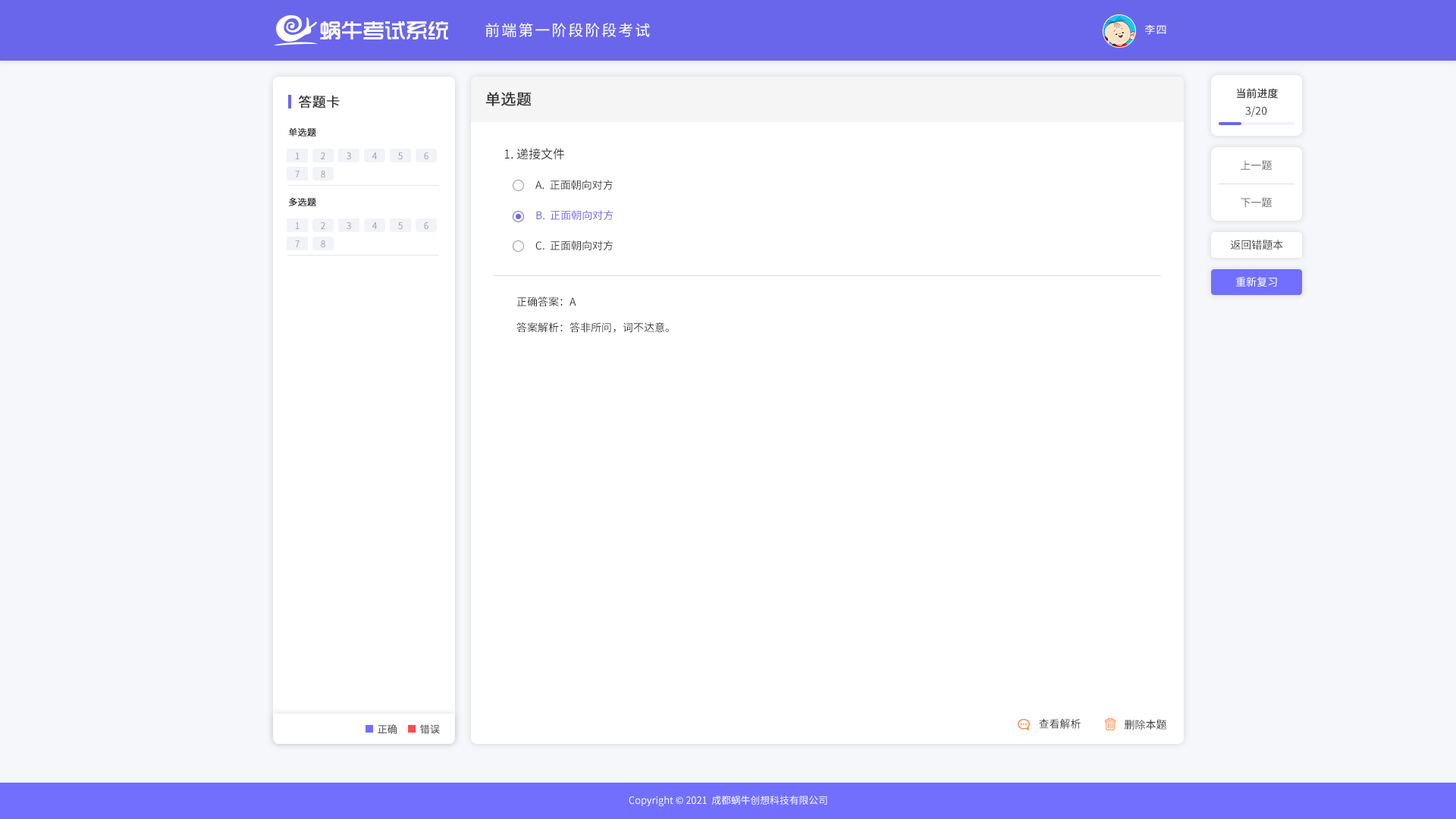
<style>
.page{position:relative;width:1456px;height:819px;background:#ffffff}
.page>*{position:absolute;margin:0}
.t1{font:21.6px "TRENDS";color:#ffffff}
.t2{font:15.2px "SourceHanSansCN-Regular";letter-spacing:0.1em;color:#ffffff;text-transform:uppercase}
.t3{font:10.6px "SourceHanSansCN-Regular";letter-spacing:0.1em;color:#ffffff;text-transform:uppercase}
.t4{font:10.6px "SourceHanSansCN-Regular";color:#333333}
.t5{font:13.6px "SourceHanSansCN-Regular";color:#333333;text-transform:uppercase;font-weight:bold}
.t6{font:15.2px "SourceHanSansCN-Regular";color:#333333;text-transform:uppercase;font-weight:bold}
.t7{font:9.1px "SourceHanSansCN-Regular";color:#333333;text-transform:uppercase;font-weight:bold}
.t8{font:12.1px "SourceHanSansCN-Regular";color:#333333;text-transform:uppercase}
.t9{font:9.1px "SourceHanSansCN-Regular";color:#999999;text-transform:uppercase}
.t10{font:10.6px "SourceHanSansCN-Regular";color:#666666}
.t11{font:10.6px "SourceHanSansCN-Regular";color:#333333;text-transform:uppercase}
.t12{font:10.6px "SourceHanSansCN-Regular";color:#6966eb;text-transform:uppercase}
.t13{font:10.6px "SourceHanSansCN-Regular";color:#ffffff}
.t14{font:9.9px "SourceHanSansCN-Regular";color:#666666;text-transform:uppercase;font-weight:bold}
.t15{font:9.7px "SourceHanSansCN-Regular";color:#ffffff}
</style>
<div class="page">
<p class="t1" style="left:320px;top:21px;width:128px;height:18px">蜗牛考试系统</p>
<p class="t2" style="left:485px;top:23px;width:165px;height:14px">前端第一阶段阶段考试</p>
<p class="t3" style="left:1145px;top:24px;width:21px;height:11px">李四</p>
<p class="t4" style="left:1237px;top:88px;width:41px;height:11px">当前进度</p>
<p class="t4" style="left:1237px;top:88px;width:41px;height:11px">当前进度</p>
<p class="t5" style="left:298px;top:95px;width:42px;height:13px">答题卡</p>
<p class="t6" style="left:485px;top:92px;width:47px;height:14px">单选题</p>
<p class="t4" style="left:1245px;top:106px;width:22px;height:11px">3/20</p>
<p class="t7" style="left:288px;top:127px;width:28px;height:9px">单选题</p>
<p class="t8" style="left:504px;top:148px;width:60px;height:12px">1. 递接文件</p>
<p class="t9" style="left:295px;top:152px;width:5px;height:7px">1</p>
<p class="t9" style="left:321px;top:152px;width:4px;height:7px">2</p>
<p class="t9" style="left:347px;top:152px;width:4px;height:8px">3</p>
<p class="t9" style="left:372px;top:152px;width:5px;height:7px">4</p>
<p class="t9" style="left:398px;top:152px;width:5px;height:8px">5</p>
<p class="t9" style="left:424px;top:152px;width:4px;height:8px">6</p>
<p class="t10" style="left:1241px;top:160px;width:31px;height:11px">上一题</p>
<p class="t9" style="left:295px;top:171px;width:5px;height:6px">7</p>
<p class="t9" style="left:321px;top:171px;width:4px;height:7px">8</p>
<p class="t11" style="left:535px;top:180px;width:78px;height:10px">A.  正面朝向对方</p>
<p class="t7" style="left:289px;top:197px;width:27px;height:9px">多选题</p>
<p class="t10" style="left:1241px;top:197px;width:31px;height:11px">下一题</p>
<p class="t12" style="left:536px;top:210px;width:77px;height:10px">B.  正面朝向对方</p>
<p class="t9" style="left:295px;top:222px;width:5px;height:7px">1</p>
<p class="t9" style="left:321px;top:222px;width:4px;height:7px">2</p>
<p class="t9" style="left:347px;top:222px;width:4px;height:8px">3</p>
<p class="t9" style="left:372px;top:222px;width:5px;height:7px">4</p>
<p class="t9" style="left:398px;top:222px;width:5px;height:8px">5</p>
<p class="t9" style="left:424px;top:222px;width:4px;height:8px">6</p>
<p class="t9" style="left:295px;top:240px;width:5px;height:7px">7</p>
<p class="t9" style="left:321px;top:240px;width:4px;height:8px">8</p>
<p class="t11" style="left:535px;top:240px;width:78px;height:10px">c.  正面朝向对方</p>
<p class="t4" style="left:1230px;top:240px;width:53px;height:9px">返回错题本</p>
<p class="t13" style="left:1236px;top:277px;width:41px;height:10px">重新复习</p>
<p class="t11" style="left:516px;top:297px;width:60px;height:9px">正确答案：A</p>
<p class="t11" style="left:516px;top:322px;width:153px;height:11px">答案解析：答非所问，词不达意。</p>
<p class="t14" style="left:378px;top:724px;width:19px;height:10px">正确</p>
<p class="t14" style="left:420px;top:724px;width:20px;height:10px">错误</p>
<p class="t11" style="left:1039px;top:719px;width:42px;height:10px">查看解析</p>
<p class="t11" style="left:1124px;top:720px;width:42px;height:10px">删除本题</p>
<p class="t15" style="left:629px;top:795px;width:198px;height:12px">Copyright © 2021  成都蜗牛创想科技有限公司</p>
</div>
